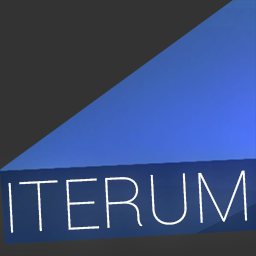
<style>
.page{position:relative;width:256px;height:256px;background:#333333}
.page>*{position:absolute;margin:0}
.t1{font:69.9px "Roboto-Thin";color:#ffffff}
</style>
<div class="page">
<p class="t1" style="left:8px;top:170px;width:240px;height:63px;rotate:-3deg">ITERUM</p>
</div>
